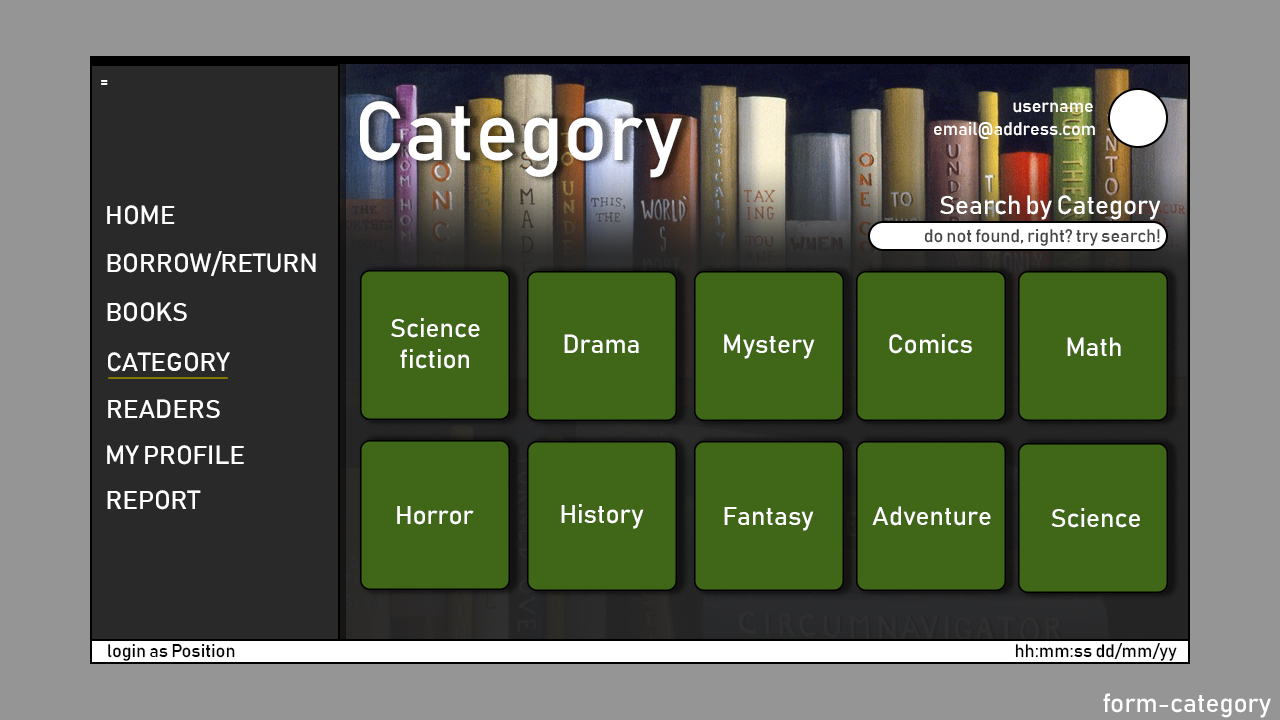
<style>
.page{position:relative;width:1280px;height:720px;background:#959595}
.page>*{position:absolute;margin:0}
.t1{font:18px "Bahnschrift";color:#ffffff}
.t2{font:82px "Bahnschrift";color:#ffffff}
.t3{font:26px "Bahnschrift";color:#fefefe}
.t4{font:26px "Bahnschrift";color:#ffffff}
.t5{font:18px "Bahnschrift";color:#464646}
.t6{font:18px "Bahnschrift";color:#000000}
</style>
<div class="page">
<p class="t1" style="left:101px;top:80px;width:7px;height:5px">=</p>
<p class="t2" style="left:360px;top:101px;width:322px;height:77px">Category</p>
<p class="t1" style="left:1013px;top:102px;width:80px;height:11px">username</p>
<p class="t1" style="left:934px;top:122px;width:161px;height:17px">email@address.com</p>
<p class="t3" style="left:940px;top:195px;width:221px;height:25px">Search by Category</p>
<p class="t4" style="left:107px;top:205px;width:68px;height:20px">HOME</p>
<p class="t5" style="left:924px;top:228px;width:236px;height:18px">do not found, right? try search!</p>
<p class="t4" style="left:107px;top:251px;width:209px;height:25px">BORROW/RETURN</p>
<p class="t4" style="left:107px;top:302px;width:80px;height:20px">BOOKS</p>
<p class="t3" style="left:391px;top:318px;width:89px;height:51px;text-align:center">Science<br>fiction</p>
<p class="t3" style="left:564px;top:334px;width:75px;height:19px">Drama</p>
<p class="t3" style="left:724px;top:334px;width:91px;height:25px">Mystery</p>
<p class="t3" style="left:889px;top:334px;width:83px;height:20px">Comics</p>
<p class="t3" style="left:1067px;top:337px;width:54px;height:19px">Math</p>
<p class="t4" style="left:108px;top:352px;width:122px;height:20px">CATEGORY</p>
<p class="t4" style="left:108px;top:399px;width:112px;height:19px">READERS</p>
<p class="t4" style="left:107px;top:445px;width:137px;height:20px">MY PROFILE</p>
<p class="t4" style="left:107px;top:490px;width:94px;height:20px">REPORT</p>
<p class="t3" style="left:397px;top:506px;width:77px;height:19px">Horror</p>
<p class="t3" style="left:561px;top:504px;width:83px;height:25px">History</p>
<p class="t3" style="left:724px;top:507px;width:90px;height:24px">Fantasy</p>
<p class="t3" style="left:872px;top:506px;width:119px;height:20px">Adventure</p>
<p class="t3" style="left:1051px;top:508px;width:89px;height:20px">Science</p>
<p class="t6" style="left:108px;top:644px;width:127px;height:17px">login as Position</p>
<p class="t6" style="left:1015px;top:643px;width:162px;height:18px">hh:mm:ss dd/mm/yy</p>
<p class="t3" style="left:1103px;top:693px;width:168px;height:25px">form-category</p>
</div>
